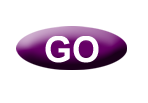
<style>
.page{position:relative;width:148px;height:103px;background:#ffffff}
.page>*{position:absolute;margin:0}
.t1{font:36px "Arial-BoldMT";color:#ffffff}
</style>
<div class="page">
<p class="t1" style="left:45px;top:36px;width:54px;height:27px">GO</p>
</div>
